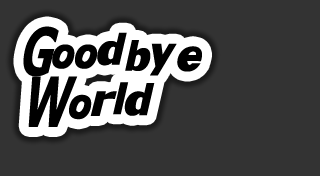
<style>
.page{position:relative;width:320px;height:176px;background:#333333}
.page>*{position:absolute;margin:0}
.t1{font:42px "KittyKatt";color:#000000}
</style>
<div class="page">
<p class="t1" style="left:23px;top:26px;width:179px;height:101px">Goodbye<br>World</p>
</div>
